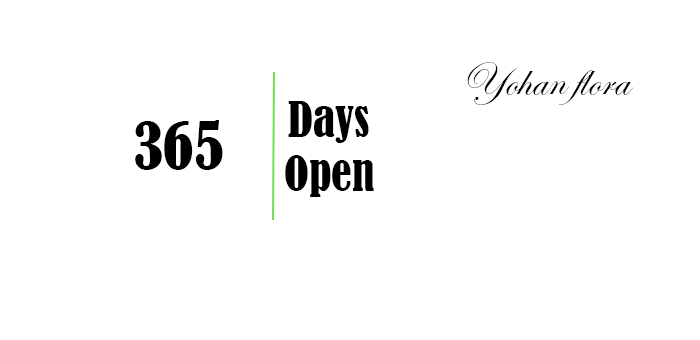
<style>
.page{position:relative;width:700px;height:340px;background:#ffffff}
.page>*{position:absolute;margin:0}
.t1{font:45.8px "EdwardianScriptITC";color:#000000}
.t2{font:45.8px/54.2px "BernardMT-Condensed";color:#000000}
.t3{font:62.3px "BernardMT-Condensed";color:#000000}
</style>
<div class="page">
<p class="t1" style="left:467px;top:62px;width:166px;height:43px">Yohan flora</p>
<p class="t2" style="left:285px;top:101px;width:89px;height:96px;text-align:center">Days <br>Open</p>
<p class="t3" style="left:135px;top:120px;width:88px;height:50px">365</p>
</div>
